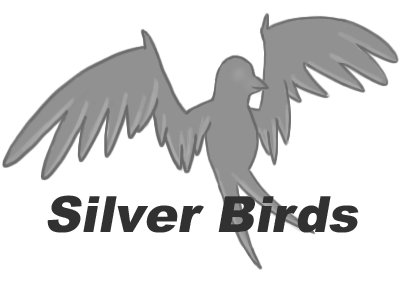
<style>
.page{position:relative;width:400px;height:289px;background:#ffffff}
.page>*{position:absolute;margin:0}
.t1{font:50px "Arial-Black";color:#313131;font-style:italic}
</style>
<div class="page">
<p class="t1" style="left:47px;top:195px;width:312px;height:38px">Silver Birds</p>
</div>
